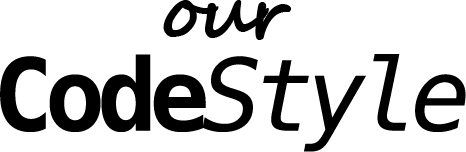
<style>
.page{position:relative;width:466px;height:152px;background:#ffffff}
.page>*{position:absolute;margin:0}
.t1{font:75px "SegoeScript-Bold";letter-spacing:-0.08em;color:#000000}
.t2{font:100px "Menlo-Italic";letter-spacing:-0.08em;color:#000000}
.t3{font:100px "Menlo-Bold";letter-spacing:-0.08em;color:#000000}
</style>
<div class="page">
<p class="t1" style="left:163px;top:0px;width:128px;height:40px">our</p>
<p class="t2" style="left:0px;top:54px;width:466px;height:98px"><span class="t3">Code</span>Style</p>
</div>
